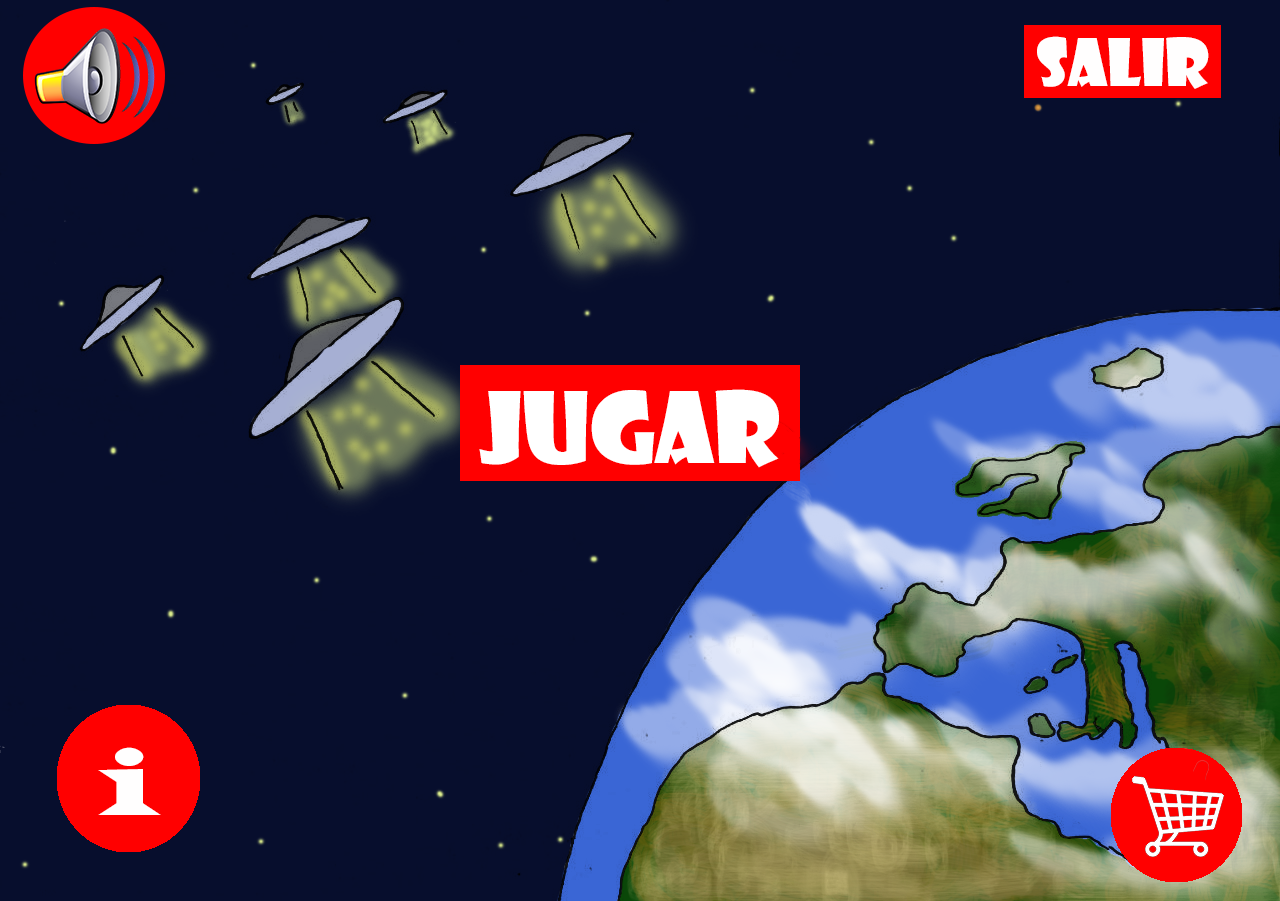
<style>
.page{position:relative;width:1280px;height:901px;background:#070e2d}
.page>*{position:absolute;margin:0}
.t1{font:64px "ShowcardGothic-Reg";color:#fffefe}
.t2{font:96px "ShowcardGothic-Reg";color:#ffffff}
.t3{font:96px "LatinWide";color:#fffefe}
</style>
<div class="page">
<p class="t1" style="left:1037px;top:36px;width:172px;height:53px">SALIR</p>
<p class="t2" style="left:479px;top:389px;width:300px;height:79px">JUGAR</p>
<p class="t3" style="left:98px;top:747px;width:63px;height:68px">i</p>
</div>
